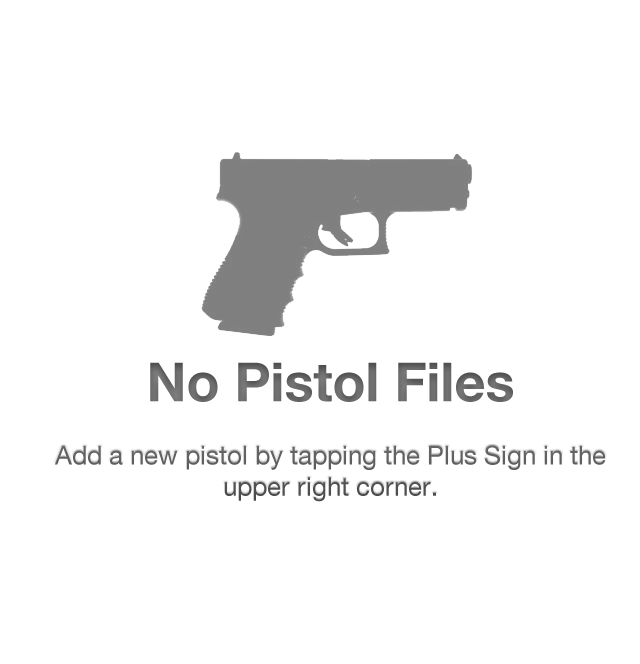
<style>
.page{position:relative;width:640px;height:664px;background:#ffffff}
.page>*{position:absolute;margin:0}
.t1{font:54px "HelveticaNeue-Bold";color:#6a6a6a}
.t2{font:26px "HelveticaNeue";color:#5f5f5f}
</style>
<div class="page">
<p class="t1" style="left:150px;top:362px;width:363px;height:40px">No Pistol Files</p>
<p class="t2" style="left:54px;top:445px;width:552px;height:57px;text-align:center">Add a new pistol by tapping the Plus Sign in the upper right corner.</p>
</div>
